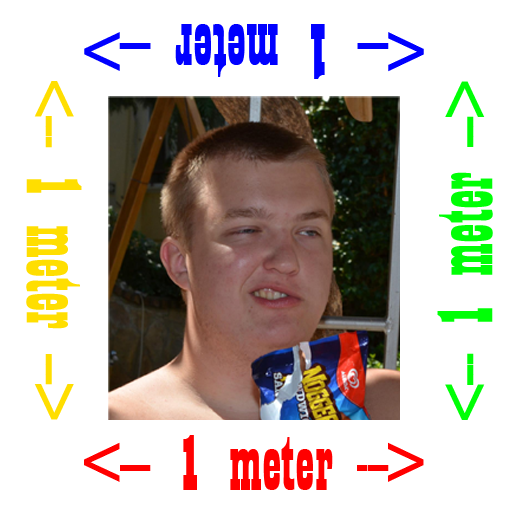
<style>
.page{position:relative;width:512px;height:512px;background:#ffffff}
.page>*{position:absolute;margin:0}
.t1{font:82px "Playbill";color:#0000ff}
.t2{font:82px "Playbill";color:#ffde00}
.t3{font:82px "Playbill";color:#00ff06}
.t4{font:82px "Playbill";color:#ff0000}
</style>
<div class="page">
<p class="t1" style="left:84px;top:24px;width:340px;height:55px;rotate:180deg">&lt;--- 1 meter ---&gt;</p>
<p class="t2" style="left:26px;top:81px;width:56px;height:339px;rotate:90deg">&lt;--- 1 meter ---&gt;</p>
<p class="t3" style="left:437px;top:81px;width:56px;height:339px;rotate:-90deg">&lt;--- 1 meter ---&gt;</p>
<p class="t4" style="left:84px;top:435px;width:340px;height:55px">&lt;--- 1 meter ---&gt;</p>
</div>
